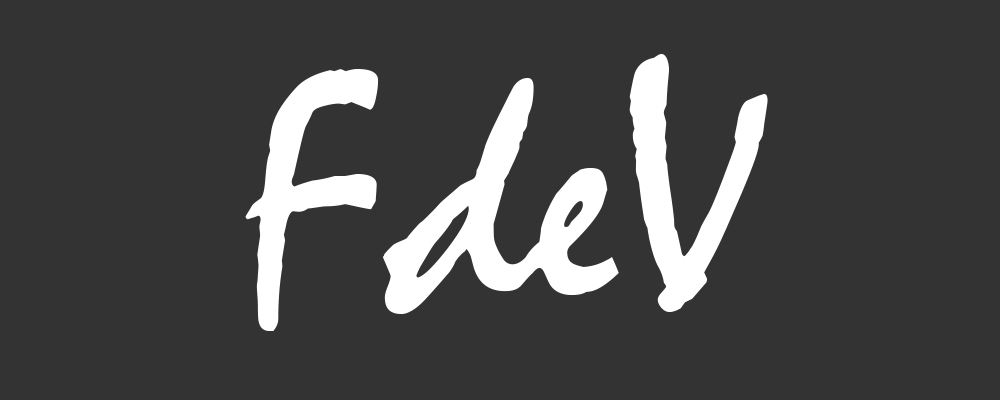
<style>
.page{position:relative;width:1000px;height:400px;background:#333333}
.page>*{position:absolute;margin:0}
.t1{font:350px "Mistral";color:#ffffff}
</style>
<div class="page">
<p class="t1" style="left:245px;top:54px;width:523px;height:277px">FdeV</p>
</div>
